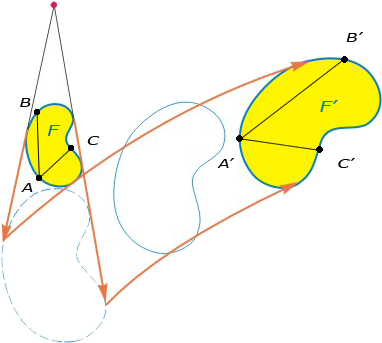
<style>
.page{position:relative;width:382px;height:343px;background:#ffffff}
.page>*{position:absolute;margin:0}
.t1{font:12.1px "Verdana";letter-spacing:-0.04em;color:#000000;font-style:italic;scale:1.4 1}
.t2{font:14.7px "Verdana";letter-spacing:-0.04em;color:#207a9f;font-style:italic;scale:1.4 1}
</style>
<div class="page">
<p class="t1" style="left:346px;top:32px;width:18px;height:10px">B’</p>
<p class="t1" style="left:20px;top:98px;width:11px;height:9px">B</p>
<p class="t2" style="left:320px;top:100px;width:18px;height:12px">F’</p>
<p class="t2" style="left:47px;top:125px;width:14px;height:11px">F</p>
<p class="t1" style="left:87px;top:136px;width:13px;height:9px">C</p>
<p class="t1" style="left:217px;top:158px;width:18px;height:10px">A’</p>
<p class="t1" style="left:338px;top:158px;width:17px;height:10px">C’</p>
<p class="t1" style="left:21px;top:183px;width:12px;height:9px">A</p>
</div>
